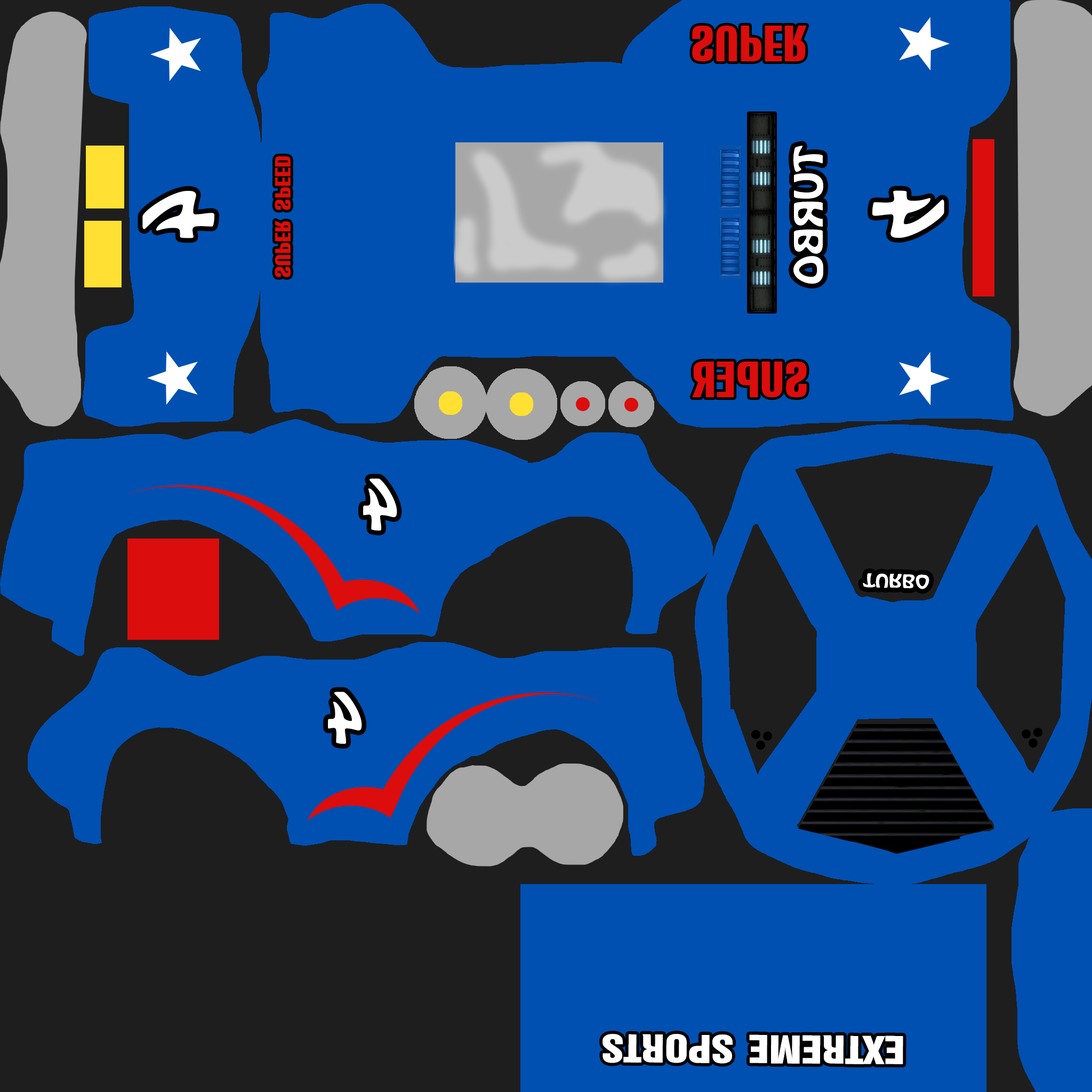
<style>
.page{position:relative;width:1092px;height:1092px;background:#0050b2}
.page>*{position:absolute;margin:0}
.t1{font:64.6px "ARubricaCnBold";color:#db0d0d;font-variant:small-caps}
.t2{font:49.8px "HoboStd";color:#ffffff;font-variant:small-caps;scale:1.19 1}
.t3{font:28.1px "ARubricaCnBold";color:#db0d0d;font-variant:small-caps;scale:1.13 1}
.t4{font:87.1px "HoboStd";color:#ffffff;font-variant:small-caps}
.t5{font:64.8px "ARubricaCnBold";color:#db0d0d;font-variant:small-caps}
.t6{font:62.4px "HoboStd";color:#ffffff;font-variant:small-caps}
.t7{font:23.6px "HoboStd";color:#ffffff;font-variant:small-caps;scale:1.2 1}
.t8{font:50.2px "Swiss921BT-RegularA";color:#ffffff;font-variant:small-caps;scale:1.21 1}
</style>
<div class="page">
<p class="t1" style="left:692px;top:26px;width:115px;height:35px">super</p>
<p class="t2" style="left:793px;top:146px;width:30px;height:138px;rotate:90deg">turbo</p>
<p class="t3" style="left:275px;top:156px;width:16px;height:121px;rotate:-90deg">super speed</p>
<p class="t4" style="left:142px;top:191px;width:72px;height:47px;rotate:90deg">4</p>
<p class="t4" style="left:872px;top:190px;width:72px;height:48px;rotate:-90deg">4</p>
<p class="t5" style="left:692px;top:362px;width:115px;height:35px;rotate:180deg">super</p>
<p class="t6" style="left:363px;top:478px;width:34px;height:53px;rotate:180deg">4</p>
<p class="t7" style="left:863px;top:573px;width:66px;height:16px;rotate:1deg">turbo</p>
<p class="t6" style="left:328px;top:692px;width:34px;height:52px;rotate:180deg">4</p>
<p class="t8" style="left:603px;top:1034px;width:300px;height:30px;rotate:-180deg">extreme sports</p>
</div>
